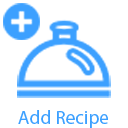
<style>
.page{position:relative;width:128px;height:128px;background:#ffffff}
.page>*{position:absolute;margin:0}
.t1{font:19.2px "MyriadPro-Regular";color:#3ca0ff}
</style>
<div class="page">
<p class="t1" style="left:18px;top:110px;width:90px;height:18px">Add Recipe</p>
</div>
